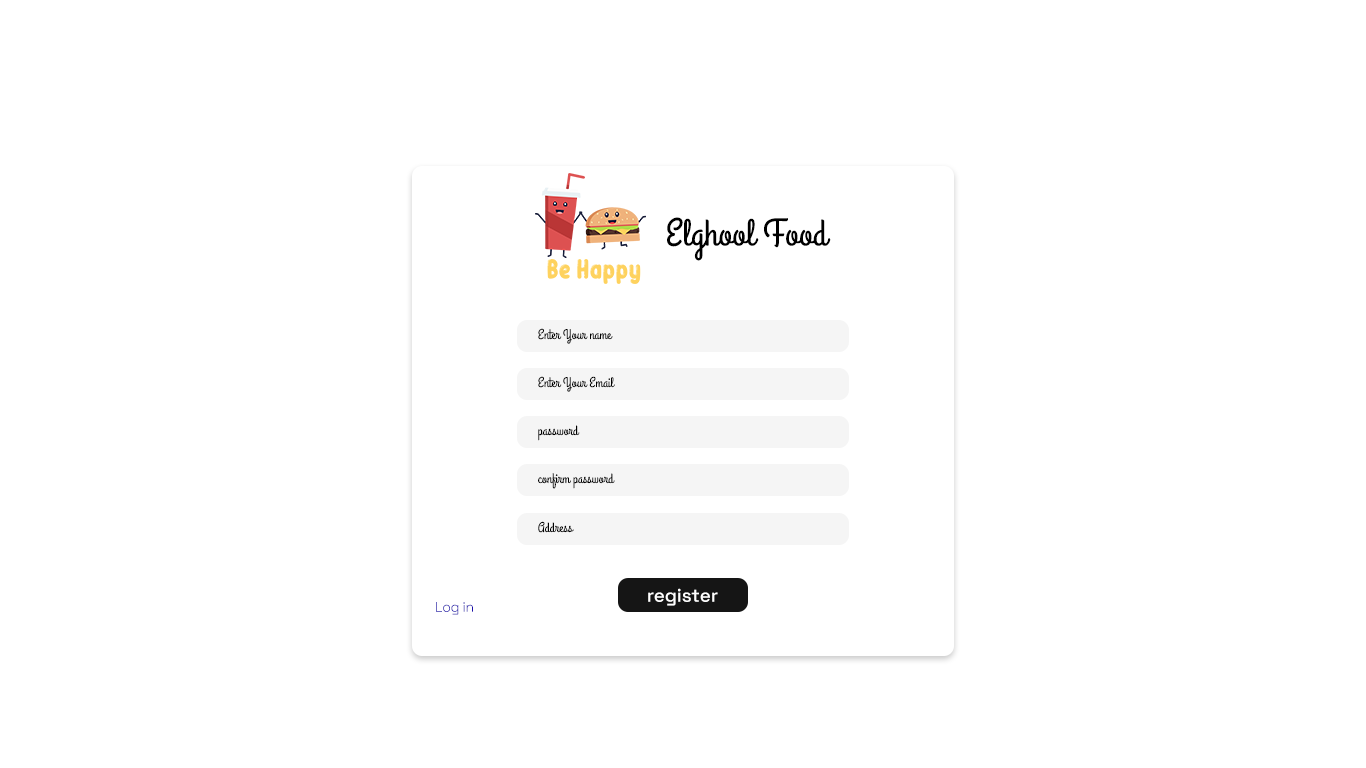
<style>
.page{position:relative;width:1366px;height:768px;background:#ffffff}
.page>*{position:absolute;margin:0}
.t1{font:38.1px "GrandHotel-Regular";color:#000000}
.t2{font:14px "GrandHotel-Regular";color:#000000}
.t3{font:18.5px "SpaceGrotesk-Medium";color:#ffffff}
.t4{font:14px "SpaceGrotesk-Light";letter-spacing:-0.02em;color:#1a0dab}
</style>
<div class="page">
<p class="t1" style="left:667px;top:217px;width:164px;height:44px">Elghool Food</p>
<p class="t2" style="left:538px;top:328px;width:75px;height:16px">Enter Your name</p>
<p class="t2" style="left:538px;top:376px;width:77px;height:16px">Enter Your Email</p>
<p class="t2" style="left:538px;top:425px;width:42px;height:16px">password</p>
<p class="t2" style="left:538px;top:473px;width:77px;height:16px">confirm password</p>
<p class="t2" style="left:538px;top:521px;width:36px;height:12px">Address</p>
<p class="t3" style="left:648px;top:588px;width:70px;height:18px">register</p>
<p class="t4" style="left:436px;top:602px;width:37px;height:13px">Log in</p>
</div>
